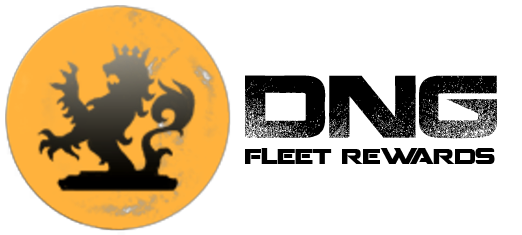
<style>
.page{position:relative;width:522px;height:235px;background:#ffffff}
.page>*{position:absolute;margin:0}
.t1{font:21.6px "Coalition";color:#000000}
.t2{font:87.6px "Coalition";color:#000000}
</style>
<div class="page">
<p class="t1" style="left:245px;top:75px;width:252px;height:89px"><span class="t2">DNG<br></span>fleet rewards</p>
</div>
